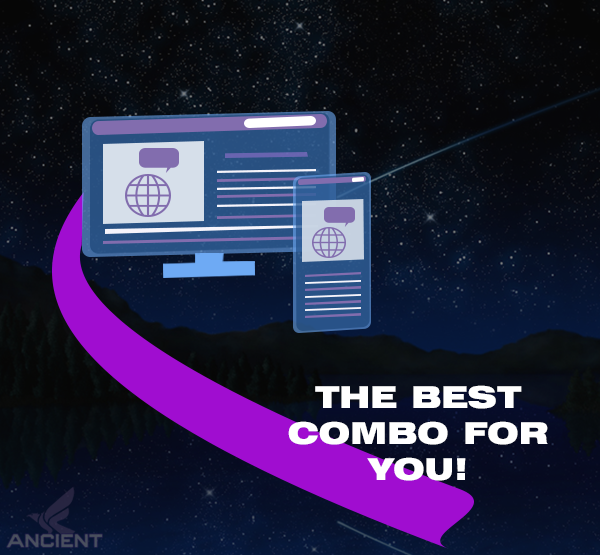
<style>
.page{position:relative;width:600px;height:555px}
.page>*{position:absolute;margin:0}
.t1{font:30px "Swiss721BT-BlackExtended";color:#ffffff}
</style>
<div class="page">
<p class="t1" style="left:288px;top:385px;width:260px;height:96px;text-align:center">THE BEST COMBO FOR YOU!</p>
</div>
